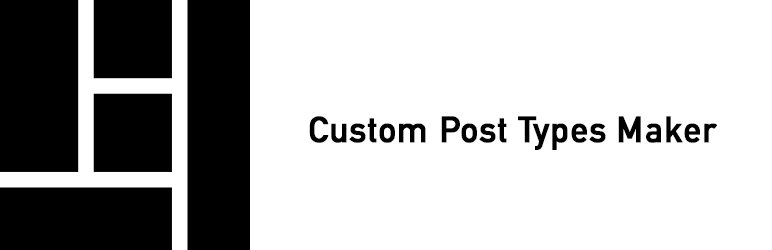
<style>
.page{position:relative;width:772px;height:250px;background:#ffffff}
.page>*{position:absolute;margin:0}
.t1{font:36px "DINAlternate-Bold";color:#000000;font-weight:bold}
</style>
<div class="page">
<p class="t1" style="left:309px;top:116px;width:408px;height:34px">Custom Post Types Maker</p>
</div>
